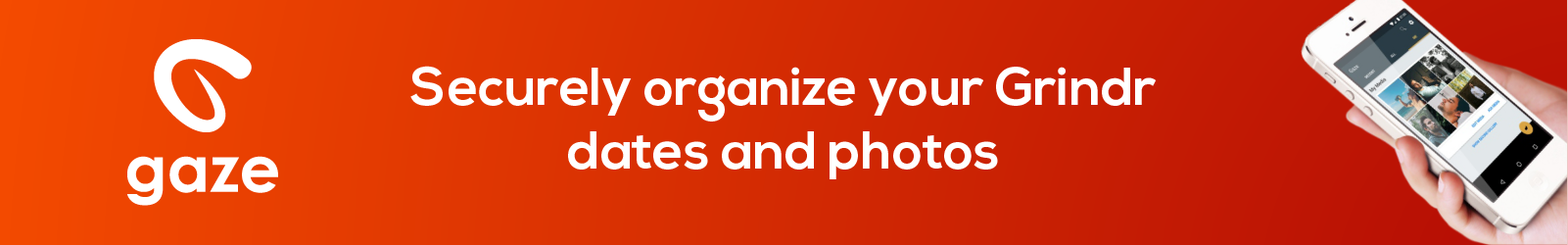
<style>
.page{position:relative;width:1568px;height:245px}
.page>*{position:absolute;margin:0}
.t1{font:53.2px "NexaBold";color:#ffffff}
</style>
<div class="page">
<p class="t1" style="left:410px;top:66px;width:747px;height:113px;text-align:center">Securely organize your Grindr<br>dates and photos</p>
</div>
